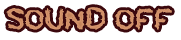
<style>
.page{position:relative;width:181px;height:40px;background:#ffffff}
.page>*{position:absolute;margin:0}
.t1{font:28px "TOBACCO";color:#c4845a;font-weight:bold}
</style>
<div class="page">
<p class="t1" style="left:6px;top:7px;width:166px;height:23px">SOUND OFF</p>
</div>
